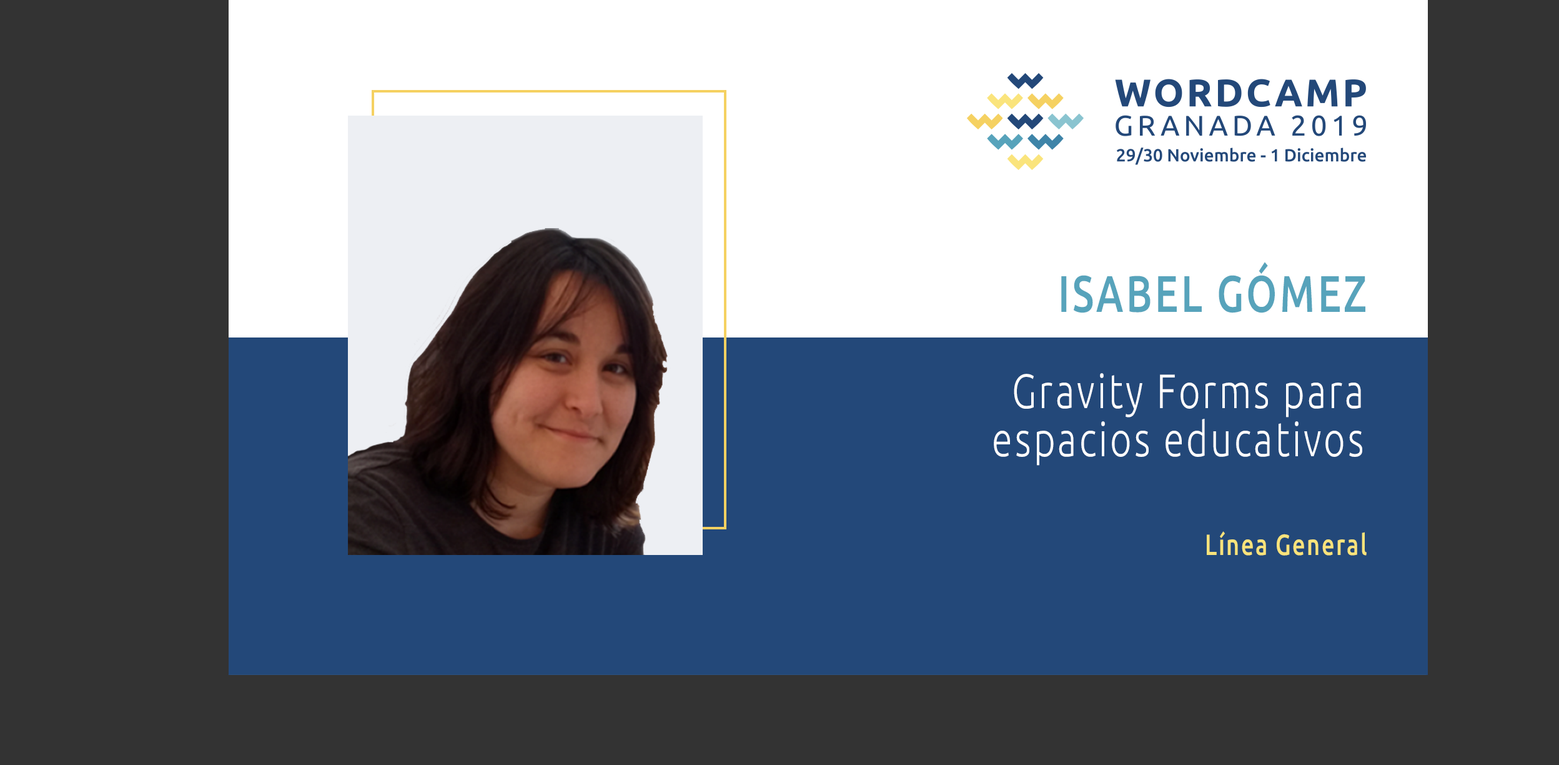
<style>
.page{position:relative;width:1559px;height:765px;background:#333333}
.page>*{position:absolute;margin:0}
.t1{font:51.4px "Ubuntu-Medium";letter-spacing:0.068em;color:#57a3bb;scale:0.77 1}
.t2{font:48.2px/48.2px "Ubuntu-Light";letter-spacing:0.068em;color:#ffffff;scale:0.77 1}
.t3{font:29.2px "Ubuntu-Medium";letter-spacing:0.068em;color:#f9e37b;scale:0.77 1}
</style>
<div class="page">
<p class="t1" style="left:1061px;top:262px;width:305px;height:51px">ISABEL GÓMEZ</p>
<p class="t2" style="left:994px;top:373px;width:369px;height:92px;text-align:right">Gravity Forms para espacios educativos</p>
<p class="t3" style="left:1207px;top:531px;width:160px;height:24px">Línea General</p>
</div>
